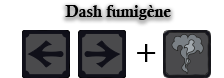
<style>
.page{position:relative;width:224px;height:78px;background:#ffffff}
.page>*{position:absolute;margin:0}
.t1{font:16px "CalisMTBol";color:#000000}
.t2{font:34.3px "CalistoMT-Italic";color:#000000}
</style>
<div class="page">
<p class="t1" style="left:65px;top:5px;width:106px;height:15px">Dash fumigène</p>
<p class="t2" style="left:137px;top:44px;width:19px;height:18px">+</p>
</div>
